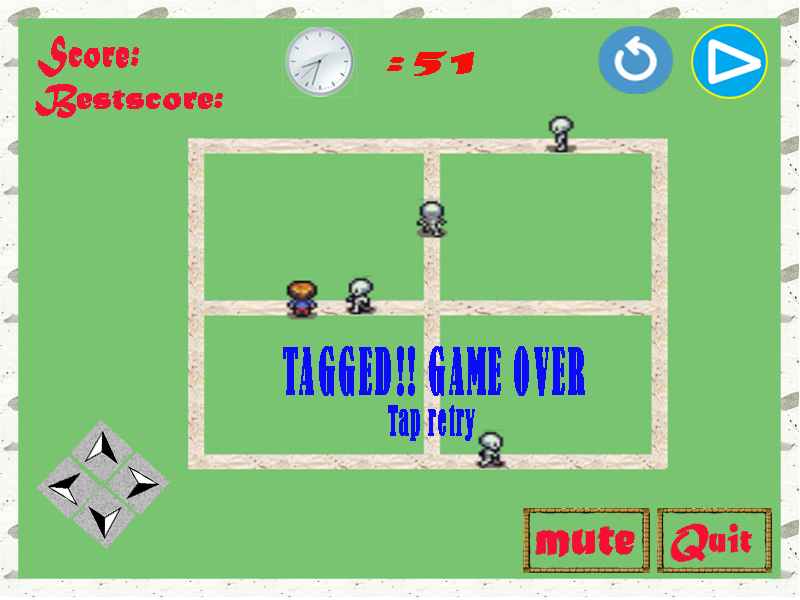
<style>
.page{position:relative;width:800px;height:600px;background:#79c471}
.page>*{position:absolute;margin:0}
.t1{font:46.4px "MaturaMTScriptCapitals";color:#f70e34;font-weight:bold;scale:0.72 1}
.t2{font:32.8px "MaturaMTScriptCapitals";color:#fb0c0c;font-weight:bold;scale:2.12 1}
.t3{font:37px "MaturaMTScriptCapitals";color:#f70e34;font-weight:bold}
.t4{font:59.8px/123.1px "BernardMT-Condensed";color:#0c0cfb;font-weight:bold;scale:0.54 1}
.t5{font:38.5px/123.1px "BernardMT-Condensed";color:#0c0cfb;font-weight:bold;scale:0.54 1}
</style>
<div class="page">
<p class="t1" style="left:38px;top:36px;width:101px;height:41px">Score:</p>
<p class="t2" style="left:387px;top:51px;width:87px;height:25px">:51</p>
<p class="t3" style="left:35px;top:84px;width:188px;height:34px">Bestscore:</p>
<p class="t4" style="left:283px;top:346px;width:302px;height:95px;text-align:center">TAGGED!! GAME OVER<br><span class="t5">Tap retry</span></p>
</div>
